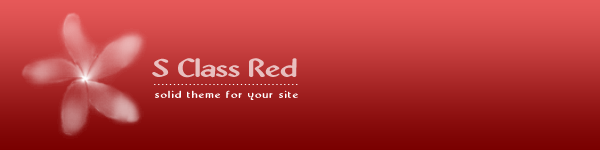
<style>
.page{position:relative;width:600px;height:150px}
.page>*{position:absolute;margin:0}
.t1{font:28.8px "Abbey-Medium";color:#e8bfbf;scale:1.25 1}
.t2{font:11.2px "Abbey-Medium";letter-spacing:0.2em;color:#ffffff}
.t3{font:11.2px "Abbey-Medium";letter-spacing:0.1em;color:#ffffff;scale:1.19 1}
</style>
<div class="page">
<p class="t1" style="left:152px;top:58px;width:145px;height:20px">S Class Red</p>
<p class="t2" style="left:154px;top:84px;width:144px;height:1px">.....................................</p>
<p class="t3" style="left:155px;top:90px;width:143px;height:10px">solid theme for your site</p>
</div>
